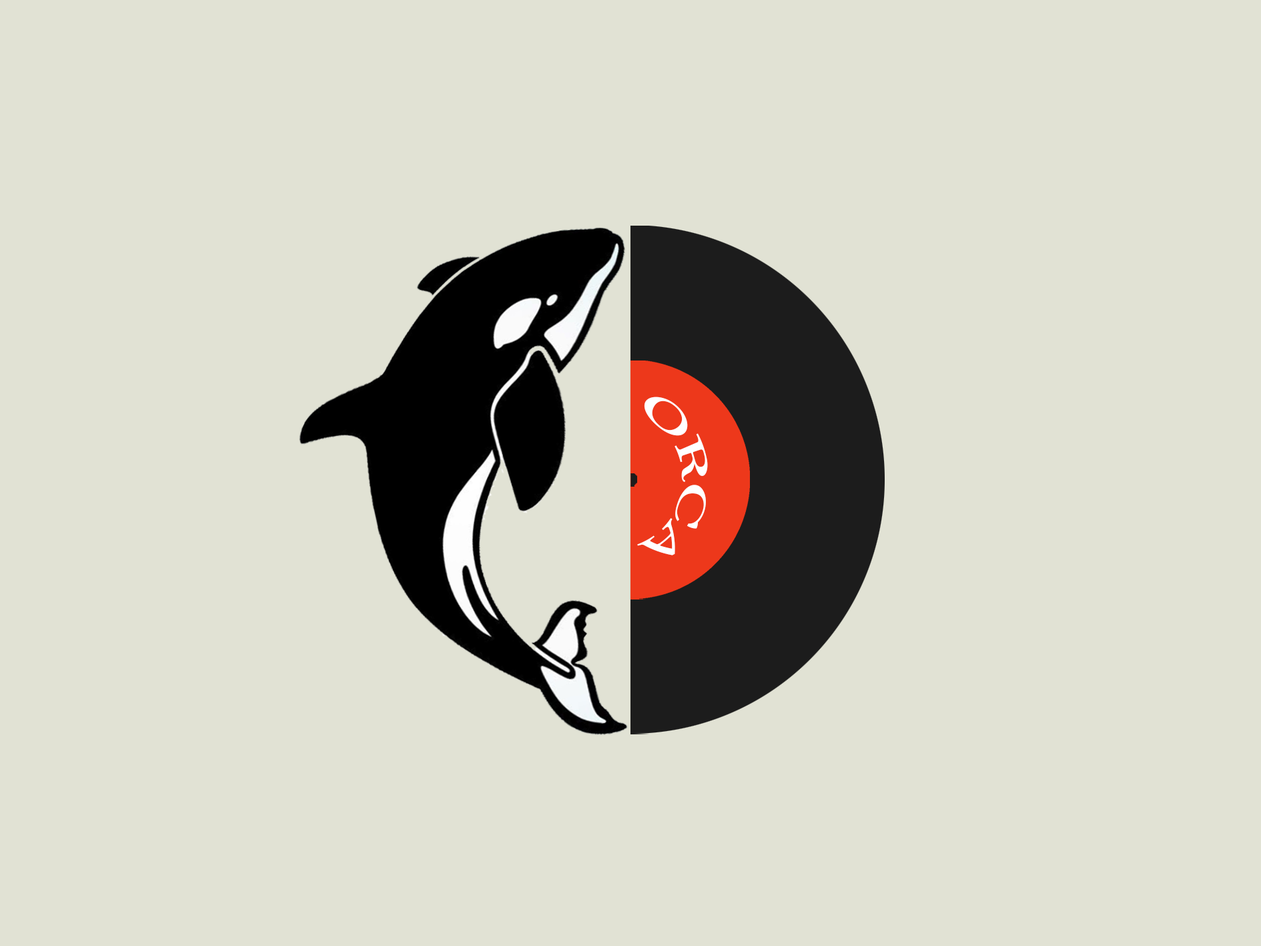
<style>
.page{position:relative;width:1261px;height:946px;background:#e1e2d4}
.page>*{position:absolute;margin:0}
.t1{font:39.8px "Marion-Regular";color:#ffffff}
</style>
<div class="page">
<p class="t1" style="left:637px;top:396px;width:71px;height:159px;rotate:90deg">ORCA</p>
</div>
